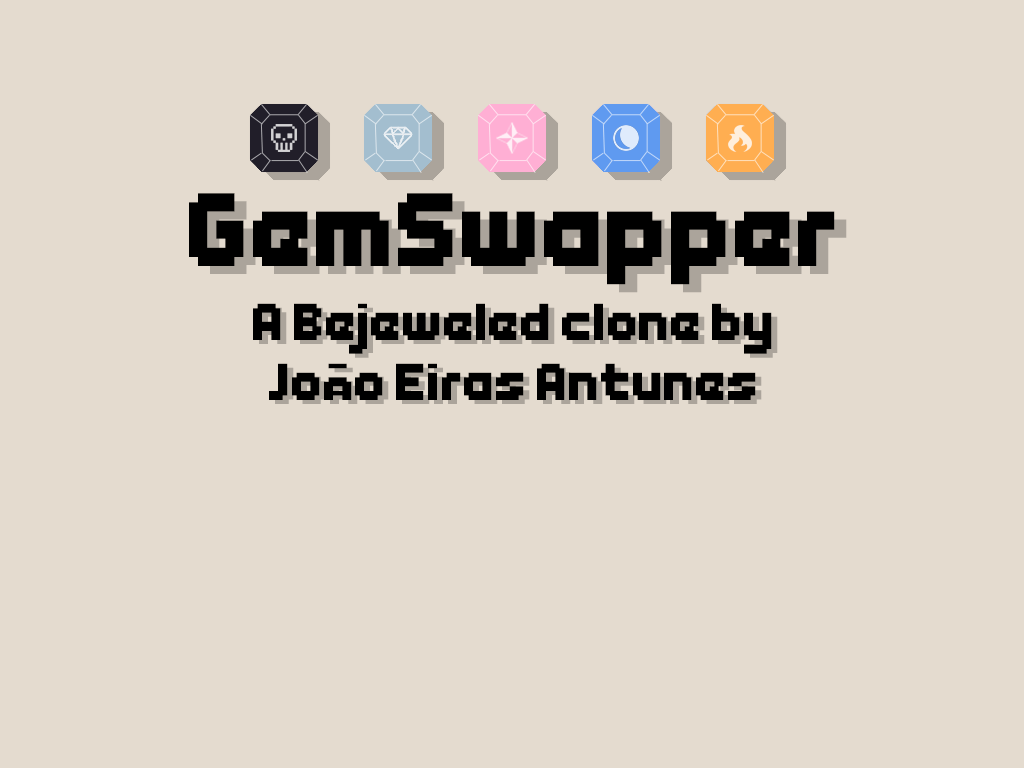
<style>
.page{position:relative;width:1024px;height:768px;background:#e4dbcf}
.page>*{position:absolute;margin:0}
.t1{font:100px "Endless-Boss-Battle";color:#000000}
.t2{font:12px "Endless-Boss-Battle";color:#000000}
</style>
<div class="page">
<p class="t1" style="left:189px;top:193px;width:646px;height:92px">GemSwapper</p>
<p class="t2" style="left:253px;top:303px;width:519px;height:97px;text-align:center">A Bejeweled clone by<br>João Eiras Antunes</p>
</div>
